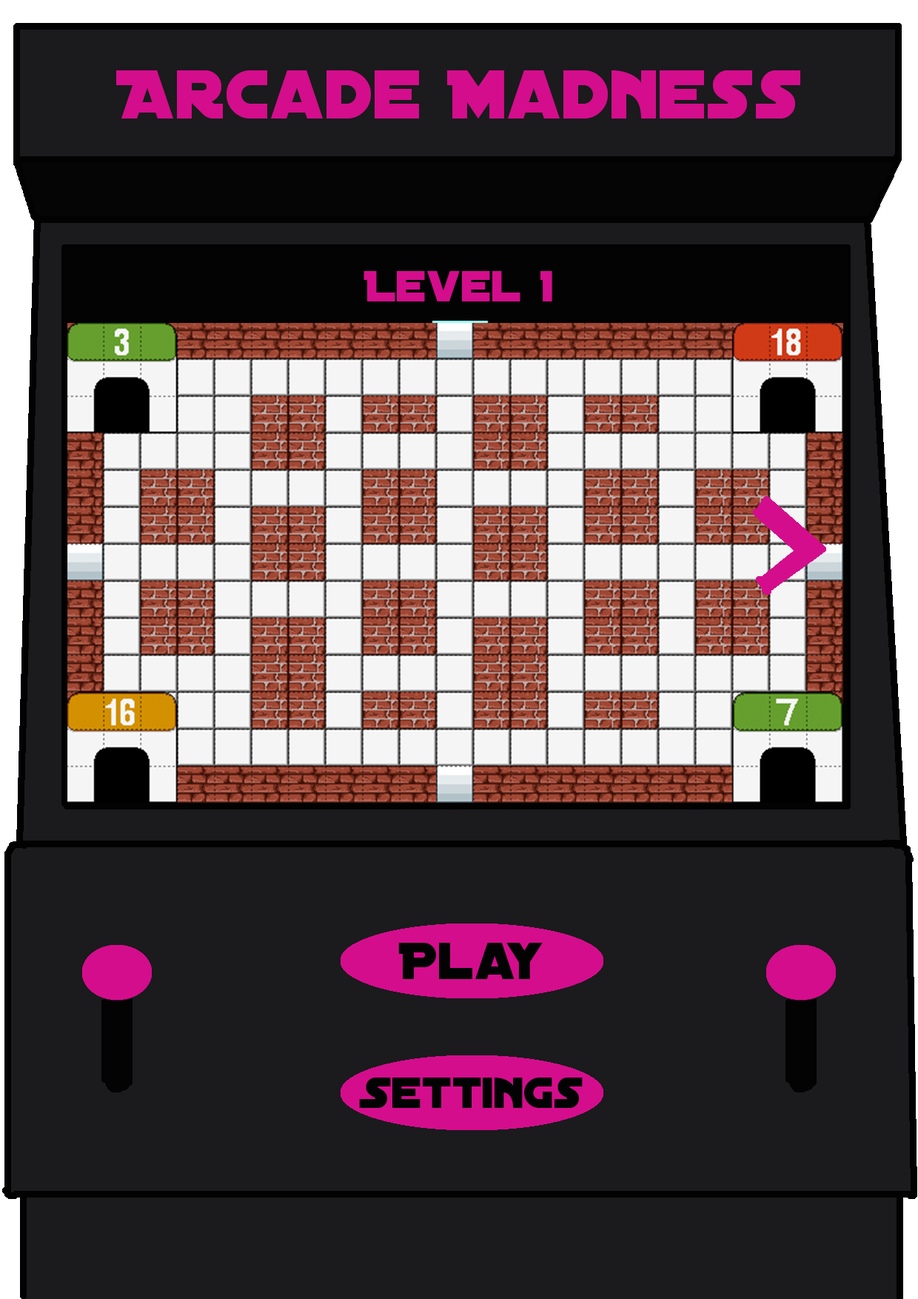
<style>
.page{position:relative;width:918px;height:1299px;background:#1b1a1d}
.page>*{position:absolute;margin:0}
.t1{font:74px "DistantGalaxy";color:#d40d8c}
.t2{font:55.5px "DistantGalaxy";color:#030304}
.t3{font:46.3px "DistantGalaxy";color:#030304}
</style>
<div class="page">
<p class="t1" style="left:116px;top:70px;width:684px;height:48px">Arcade Madness</p>
<p class="t2" style="left:398px;top:943px;width:145px;height:36px">Play</p>
<p class="t3" style="left:359px;top:1077px;width:224px;height:31px">Settings</p>
</div>
